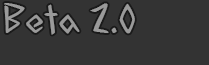
<style>
.page{position:relative;width:209px;height:65px;background:#333333}
.page>*{position:absolute;margin:0}
.t1{font:36.7px "AcadianRunes-Regular";color:#9a9a9a}
</style>
<div class="page">
<p class="t1" style="left:4px;top:3px;width:131px;height:32px">Beta 2.0</p>
</div>
